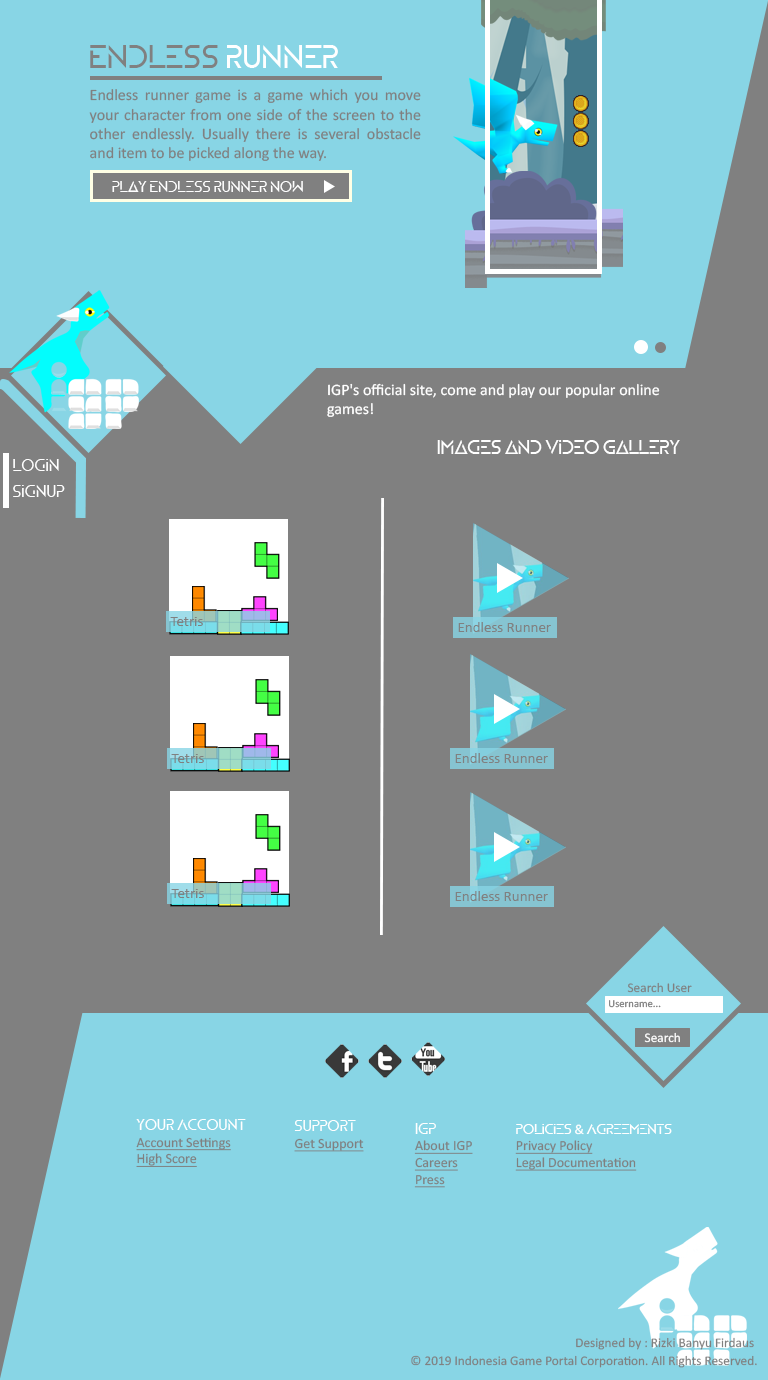
<style>
.page{position:relative;width:768px;height:1380px;background:#88d5e5}
.page>*{position:absolute;margin:0}
.t1{font:32px "ZELDA";color:#808080}
.t2{font:32px "ZELDA";color:#ffffff}
.t3{font:16px "Calibri";color:#808080}
.t4{font:15px "ZELDA";color:#ffffff}
.t5{font:16px "Calibri";color:#ffffff}
.t6{font:18.6px "ZELDA";color:#ffffff}
.t7{font:16px "ZELDA";color:#ffffff}
.t8{font:15px "Calibri";color:#808080}
.t9{font:13.3px "Calibri";color:#808080}
.t10{font:10.7px "Calibri";color:#808080}
.t11{font:13.3px "Calibri";color:#ffffff}
.t12{font:14px "Calibri";color:#808080;text-decoration:underline}
.t13{font:15.2px "ZELDA";color:#ffffff}
.t14{font:14px "ZELDA";color:#ffffff}
.t15{font:14px "Calibri";color:#ffffff}
</style>
<div class="page">
<p class="t1" style="left:90px;top:45px;width:248px;height:23px">Endless <span class="t2">Runner</span></p>
<p class="t3" style="left:89px;top:88px;width:332px;height:73px;text-align:justify">Endless runner game is a game which you move your character from one side of the screen to the other endlessly. Usually there is several obstacle and item to be picked along the way.</p>
<p class="t4" style="left:112px;top:181px;width:191px;height:11px">Play Endless Runner Now</p>
<p class="t5" style="left:327px;top:383px;width:333px;height:34px;text-align:justify">IGP's official site, come and play our popular online games!</p>
<p class="t6" style="left:437px;top:440px;width:243px;height:14px">Images and Video Gallery</p>
<p class="t7" style="left:13px;top:459px;width:46px;height:12px">Login</p>
<p class="t7" style="left:13px;top:485px;width:52px;height:12px">SignUp</p>
<p class="t8" style="left:170px;top:617px;width:33px;height:9px">Tetris</p>
<p class="t8" style="left:458px;top:622px;width:93px;height:10px">Endless Runner</p>
<p class="t8" style="left:171px;top:754px;width:33px;height:9px">Tetris</p>
<p class="t8" style="left:455px;top:753px;width:93px;height:10px">Endless Runner</p>
<p class="t8" style="left:171px;top:889px;width:33px;height:9px">Tetris</p>
<p class="t8" style="left:455px;top:891px;width:93px;height:10px">Endless Runner</p>
<p class="t9" style="left:627px;top:982px;width:65px;height:11px">Search User</p>
<p class="t10" style="left:609px;top:1000px;width:52px;height:8px">Username...</p>
<p class="t11" style="left:644px;top:1032px;width:36px;height:11px">Search</p>
<p class="t12" style="left:136px;top:1119px;width:110px;height:48px;text-align:justify"><span class="t13">Your Account<br></span>Account Settings<br>High Score</p>
<p class="t12" style="left:294px;top:1120px;width:70px;height:32px;text-align:justify"><span class="t13">Support<br></span>Get Support</p>
<p class="t12" style="left:414px;top:1123px;width:59px;height:65px;text-align:justify"><span class="t13">IGP<br></span>About IGP<br>Careers<br>Press</p>
<p class="t12" style="left:515px;top:1124px;width:157px;height:47px;text-align:justify"><span class="t14">Policies </span><span class="t15">&amp;</span><span class="t14"> Agreements<br></span>Privacy Policy<br>Legal Documentation</p>
<p class="t9" style="left:576px;top:1337px;width:178px;height:13px">Designed by : Rizki Banyu Firdaus</p>
<p class="t9" style="left:411px;top:1355px;width:346px;height:13px">© 2019 Indonesia Game Portal Corporation. All Rights Reserved.</p>
</div>
